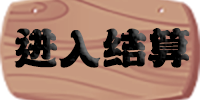
<style>
.page{position:relative;width:200px;height:100px}
.page>*{position:absolute;margin:0}
.t1{font:50px "-";letter-spacing:-0.02em;color:#000000;font-weight:bold}
</style>
<div class="page">
<p class="t1" style="left:14px;top:28px;width:176px;height:40px">进入结算</p>
</div>
